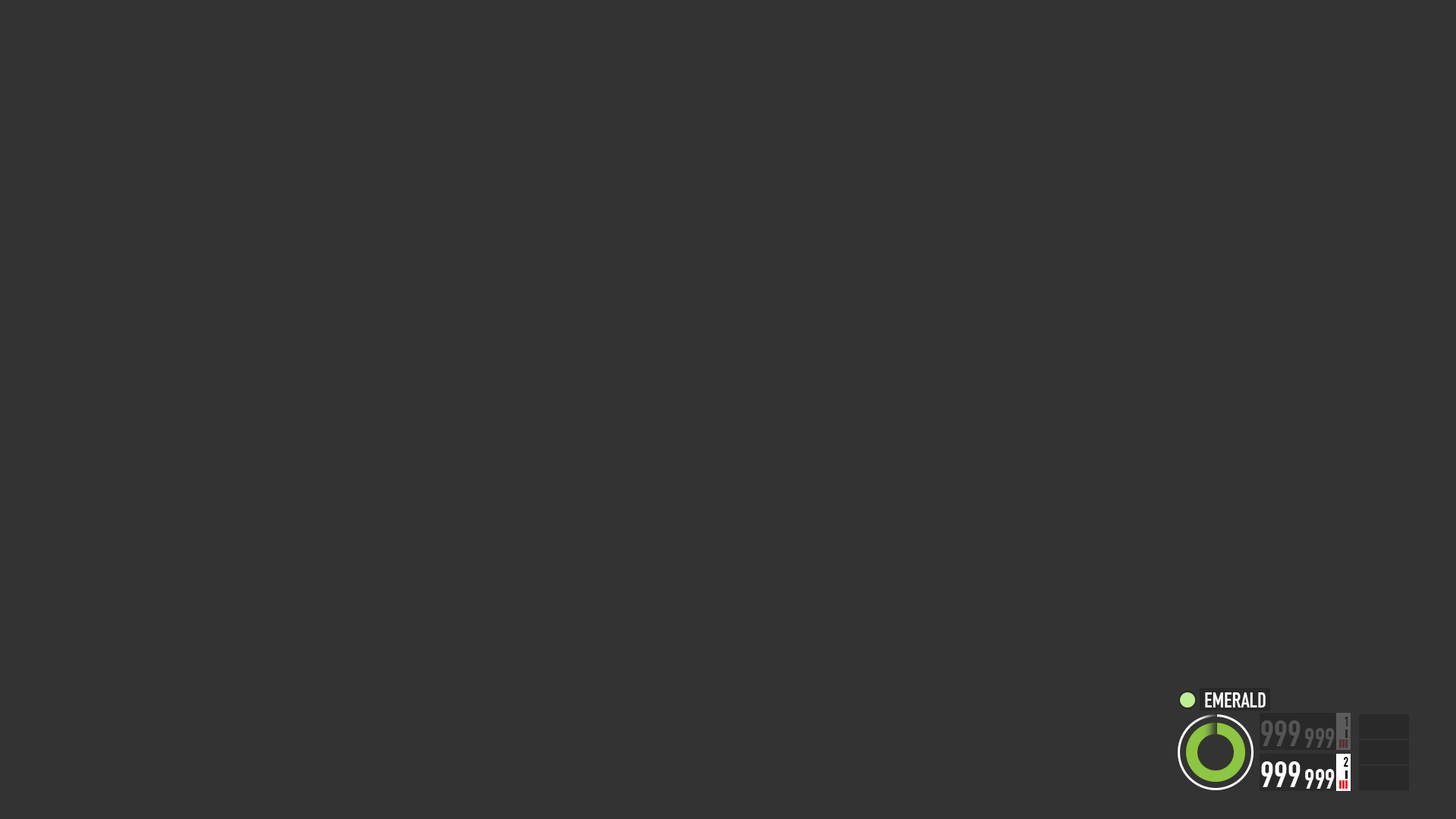
<style>
.page{position:relative;width:1456px;height:819px;background:#333333}
.page>*{position:absolute;margin:0}
.t1{font:21.2px "DINEngschrift";color:#ffffff}
.t2{font:36.4px "DINEngschrift";color:#545454}
.t3{font:13.6px "DINEngschrift";color:#292929}
.t4{font:27.3px "DINEngschrift";color:#545454}
.t5{font:36.4px "DINEngschrift";color:#ffffff}
.t6{font:13.6px "DINEngschrift";color:#000000}
.t7{font:27.3px "DINEngschrift";color:#ffffff}
</style>
<div class="page">
<p class="t1" style="left:1205px;top:692px;width:61px;height:16px">EMERALD</p>
<p class="t2" style="left:1261px;top:720px;width:40px;height:26px">999</p>
<p class="t3" style="left:1345px;top:717px;width:3px;height:9px">1</p>
<p class="t4" style="left:1305px;top:728px;width:30px;height:20px">999</p>
<p class="t5" style="left:1261px;top:761px;width:40px;height:26px">999</p>
<p class="t6" style="left:1344px;top:757px;width:4px;height:10px">2</p>
<p class="t7" style="left:1305px;top:769px;width:30px;height:20px">999</p>
</div>
